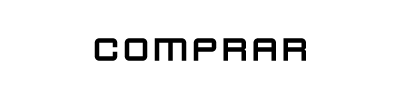
<style>
.page{position:relative;width:400px;height:100px;background:#ffffff}
.page>*{position:absolute;margin:0}
.t1{font:36px "KenVector-Future";color:#000000}
</style>
<div class="page">
<p class="t1" style="left:94px;top:38px;width:212px;height:23px">comprar</p>
</div>
